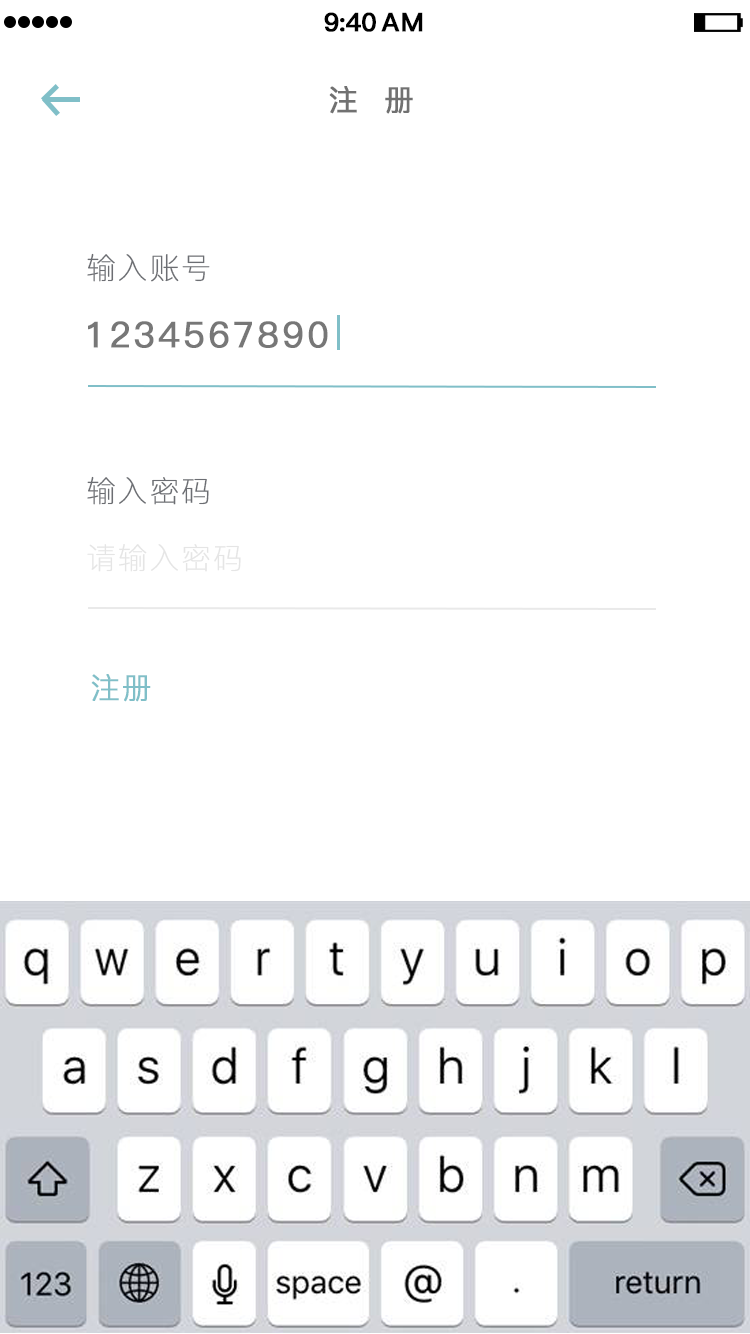
<style>
.page{position:relative;width:750px;height:1334px;background:#ffffff}
.page>*{position:absolute;margin:0}
.t1{font:25.4px "PingFang-SC-Bold";letter-spacing:-0.028em;color:#000000;font-weight:bold}
.t2{font:25.4px "PingFang-SC-Bold";letter-spacing:0.052em;color:#000000;font-weight:bold}
.t3{font:29.4px "PingFang-SC-Medium";letter-spacing:0.052em;color:#717171;font-weight:bold}
.t4{font:29.4px "PingFang-SC-ExtraLight";letter-spacing:0.052em;color:#6c6e73;font-weight:bold}
.t5{font:35.4px "PingFang-SC-Medium";letter-spacing:0.072em;color:#777777;font-weight:bold}
.t6{font:29.4px "PingFang-SC-ExtraLight";letter-spacing:0.052em;color:#e5e5e5;font-weight:bold}
.t7{font:29.4px "PingFang-SC-Regular";letter-spacing:0.052em;color:#80bfc8;font-weight:bold}
</style>
<div class="page">
<p class="t1" style="left:324px;top:12px;width:52px;height:20px">9:40</p>
<p class="t2" style="left:381px;top:12px;width:42px;height:20px">AM</p>
<p class="t3" style="left:329px;top:86px;width:84px;height:28px">注  册</p>
<p class="t4" style="left:87px;top:253px;width:123px;height:29px">输入账号</p>
<p class="t5" style="left:88px;top:321px;width:240px;height:27px">1234567890</p>
<p class="t4" style="left:87px;top:476px;width:122px;height:29px">输入密码</p>
<p class="t6" style="left:87px;top:544px;width:154px;height:28px">请输入密码</p>
<p class="t7" style="left:91px;top:674px;width:60px;height:28px">注册</p>
</div>
